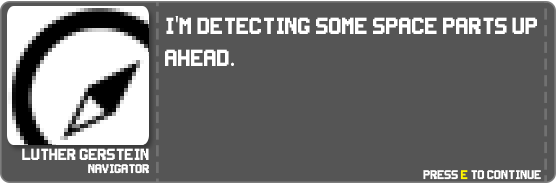
<style>
.page{position:relative;width:557px;height:184px;background:#555555}
.page>*{position:absolute;margin:0}
.t1{font:26px "Super-Smash-TV";color:#ffffff}
.t2{font:26px "MyriadPro-Regular";color:#ffffff}
.t3{font:18px "Super-Smash-TV";color:#ffffff}
.t4{font:14px "Super-Smash-TV";color:#ffffff}
</style>
<div class="page">
<p class="t1" style="left:165px;top:16px;width:372px;height:50px">I<span class="t2">'</span>m detecting some space parts up ahead<span class="t2">.</span></p>
<p class="t3" style="left:22px;top:148px;width:127px;height:12px">Luther Gerstein</p>
<p class="t4" style="left:88px;top:164px;width:61px;height:10px">Navigator</p>
</div>
